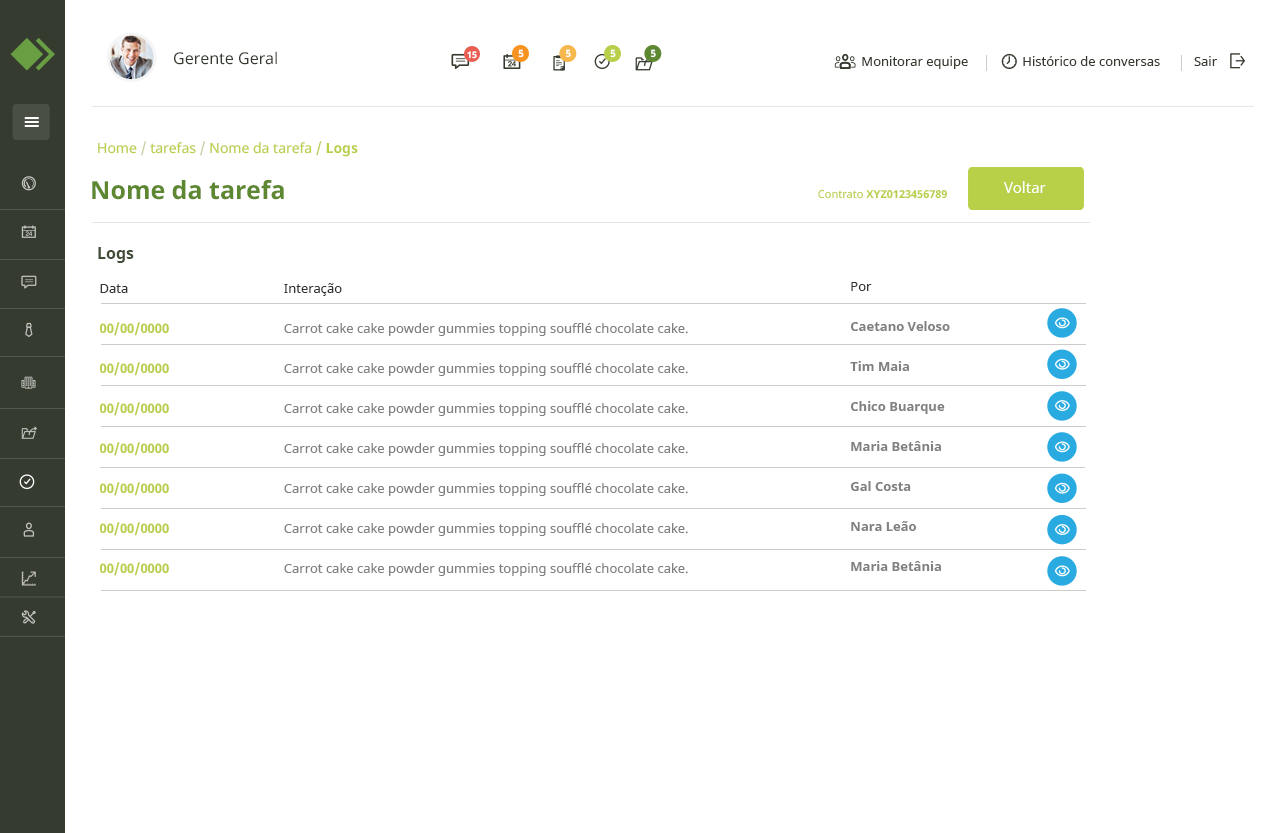
<style>
.page{position:relative;width:1280px;height:833px;background:#ffffff}
.page>*{position:absolute;margin:0}
.t1{font:16px "NotoSans";color:#353b2f}
.t2{font:9px "NotoSans-Bold";color:#ffffff}
.t3{font:10px "NotoSans-Bold";color:#ffffff}
.t4{font:13px "NotoSans";color:#353b2f}
.t5{font:14px "NotoSans";color:#b8cf49}
.t6{font:14px "NotoSans";color:#c7cfa1}
.t7{font:14px "NotoSans-Bold";color:#b8cf49}
.t8{font:25px "NotoSans-Bold";color:#5d8730}
.t9{font:15px "NotoSans";color:#ffffff}
.t10{font:11px "NotoSans-Bold";color:#b8cf49}
.t11{font:11px "NotoSans";color:#b8cf49}
.t12{font:16px "NotoSans-Bold";color:#424d38}
.t13{font:13px/40px "NotoSans-Bold";color:#b8cf49}
.t14{font:13px/40px "NotoSans";color:#333333}
.t15{font:13px/40px "NotoSans";color:#808080}
.t16{font:13px/40px "NotoSans-Bold";color:#808080}
</style>
<div class="page">
<p class="t1" style="left:174px;top:51px;width:103px;height:14px">Gerente Geral</p>
<p class="t2" style="left:467px;top:51px;width:10px;height:8px">15</p>
<p class="t3" style="left:518px;top:49px;width:6px;height:9px">5</p>
<p class="t3" style="left:566px;top:49px;width:5px;height:9px">5</p>
<p class="t3" style="left:610px;top:49px;width:6px;height:9px">5</p>
<p class="t3" style="left:651px;top:49px;width:5px;height:9px">5</p>
<p class="t4" style="left:862px;top:56px;width:355px;height:13px">Monitorar equipe                Histórico de conversas          Sair</p>
<p class="t5" style="left:98px;top:141px;width:260px;height:16px">Home <span class="t6">/</span> tarefas <span class="t6">/ </span>Nome da tarefa /<span class="t7"> Logs</span></p>
<p class="t8" style="left:92px;top:179px;width:192px;height:21px">Nome da tarefa</p>
<p class="t9" style="left:1004px;top:181px;width:42px;height:12px">Voltar</p>
<p class="t10" style="left:818px;top:189px;width:130px;height:10px"><span class="t11">Contrato</span> XYZ0123456789</p>
<p class="t12" style="left:98px;top:247px;width:36px;height:16px">Logs</p>
<p class="t13" style="left:99px;top:284px;width:70px;height:292px"><span class="t14">Data<br></span>00/00/0000<br>00/00/0000<br>00/00/0000<br>00/00/0000<br>00/00/0000<br>00/00/0000<br>00/00/0000</p>
<p class="t15" style="left:284px;top:283px;width:404px;height:293px"><span class="t14">Interação<br></span>Carrot cake cake powder gummies topping soufflé chocolate cake.<br>Carrot cake cake powder gummies topping soufflé chocolate cake.<br>Carrot cake cake powder gummies topping soufflé chocolate cake.<br>Carrot cake cake powder gummies topping soufflé chocolate cake.<br>Carrot cake cake powder gummies topping soufflé chocolate cake.<br>Carrot cake cake powder gummies topping soufflé chocolate cake.<br>Carrot cake cake powder gummies topping soufflé chocolate cake.</p>
<p class="t16" style="left:850px;top:282px;width:100px;height:289px"><span class="t14">Por<br></span>Caetano Veloso<br>Tim Maia<br>Chico Buarque<br>Maria Betânia<br>Gal Costa<br>Nara Leão<br>Maria Betânia</p>
</div>
